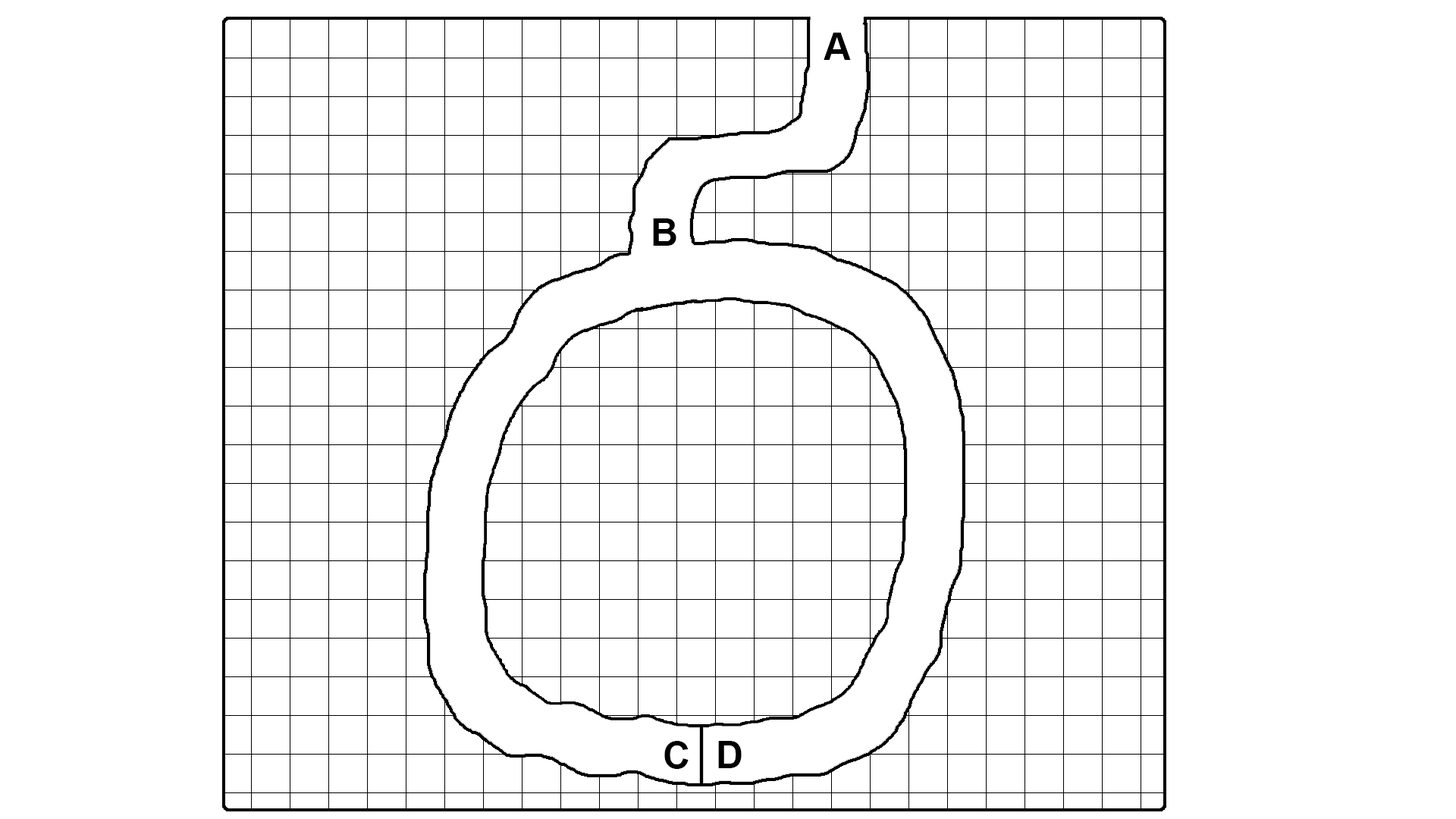
<style>
.page{position:relative;width:1456px;height:819px;background:#ffffff}
.page>*{position:absolute;margin:0}
.t1{font:37.9px "Arial-BoldMT";color:#000000}
</style>
<div class="page">
<p class="t1" style="left:824px;top:33px;width:27px;height:27px">A</p>
<p class="t1" style="left:653px;top:218px;width:23px;height:28px">B</p>
<p class="t1" style="left:664px;top:741px;width:25px;height:28px">C</p>
<p class="t1" style="left:718px;top:741px;width:24px;height:27px">D</p>
</div>
